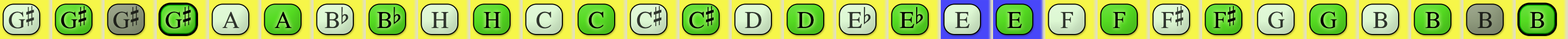
<style>
.page{position:relative;width:1568px;height:39px}
.page>*{position:absolute;margin:0}
.t1{font:24.1px "OpusChords";letter-spacing:-0.025em;color:#2f352d}
.t2{font:24.1px "OpusChords";letter-spacing:-0.025em;color:#000000}
.t3{font:24.1px "OpusChords";letter-spacing:-0.025em;color:#1e211b}
.t4{font:24.1px "OpusChords";color:#2f352d}
.t5{font:24.1px "OpusChords";color:#000000}
.t6{font:24.1px "OpusChords";color:#30352d}
.t7{font:24.1px "OpusChords";color:#30362e}
.t8{font:24.1px "OpusChords";color:#1f211b}
</style>
<div class="page">
<p class="t1" style="left:9px;top:6px;width:25px;height:23px">G#</p>
<p class="t2" style="left:61px;top:6px;width:25px;height:23px">G#</p>
<p class="t3" style="left:113px;top:6px;width:26px;height:23px">G#</p>
<p class="t2" style="left:165px;top:6px;width:26px;height:23px">G#</p>
<p class="t4" style="left:222px;top:12px;width:17px;height:16px">A</p>
<p class="t5" style="left:274px;top:12px;width:17px;height:16px">A</p>
<p class="t6" style="left:325px;top:7px;width:23px;height:21px">Bb</p>
<p class="t5" style="left:377px;top:7px;width:24px;height:21px">Bb</p>
<p class="t6" style="left:431px;top:12px;width:17px;height:16px">H</p>
<p class="t5" style="left:483px;top:12px;width:18px;height:16px">H</p>
<p class="t7" style="left:536px;top:12px;width:15px;height:17px">C</p>
<p class="t5" style="left:589px;top:12px;width:15px;height:17px">C</p>
<p class="t4" style="left:637px;top:6px;width:24px;height:23px">C#</p>
<p class="t5" style="left:689px;top:6px;width:25px;height:23px">C#</p>
<p class="t4" style="left:745px;top:12px;width:16px;height:16px">D</p>
<p class="t5" style="left:797px;top:12px;width:17px;height:16px">D</p>
<p class="t6" style="left:847px;top:7px;width:24px;height:21px">Eb</p>
<p class="t5" style="left:900px;top:7px;width:23px;height:21px">Eb</p>
<p class="t7" style="left:955px;top:12px;width:14px;height:16px">E</p>
<p class="t5" style="left:1007px;top:12px;width:15px;height:16px">E</p>
<p class="t7" style="left:1060px;top:12px;width:13px;height:16px">F</p>
<p class="t5" style="left:1113px;top:12px;width:12px;height:16px">F</p>
<p class="t6" style="left:1161px;top:6px;width:23px;height:22px">F#</p>
<p class="t5" style="left:1213px;top:6px;width:23px;height:22px">F#</p>
<p class="t4" style="left:1268px;top:12px;width:17px;height:17px">G</p>
<p class="t5" style="left:1320px;top:12px;width:17px;height:17px">G</p>
<p class="t6" style="left:1373px;top:12px;width:15px;height:16px">B</p>
<p class="t5" style="left:1425px;top:12px;width:15px;height:16px">B</p>
<p class="t8" style="left:1478px;top:12px;width:14px;height:16px">B</p>
<p class="t5" style="left:1530px;top:12px;width:14px;height:16px">B</p>
</div>
